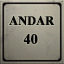
<style>
.page{position:relative;width:64px;height:64px}
.page>*{position:absolute;margin:0}
.t1{font:12.7px "TimesNewRomanPS-BoldMT";letter-spacing:0.005em;color:#040404;text-transform:uppercase;font-weight:bold;scale:0.95 1}
.t2{font:14.3px "TimesNewRomanPS-BoldMT";letter-spacing:0.005em;color:#040404;text-transform:uppercase;font-weight:bold;scale:0.97 1}
</style>
<div class="page">
<p class="t1" style="left:9px;top:16px;width:46px;height:10px">andar</p>
<p class="t2" style="left:23px;top:34px;width:15px;height:10px">40</p>
</div>
